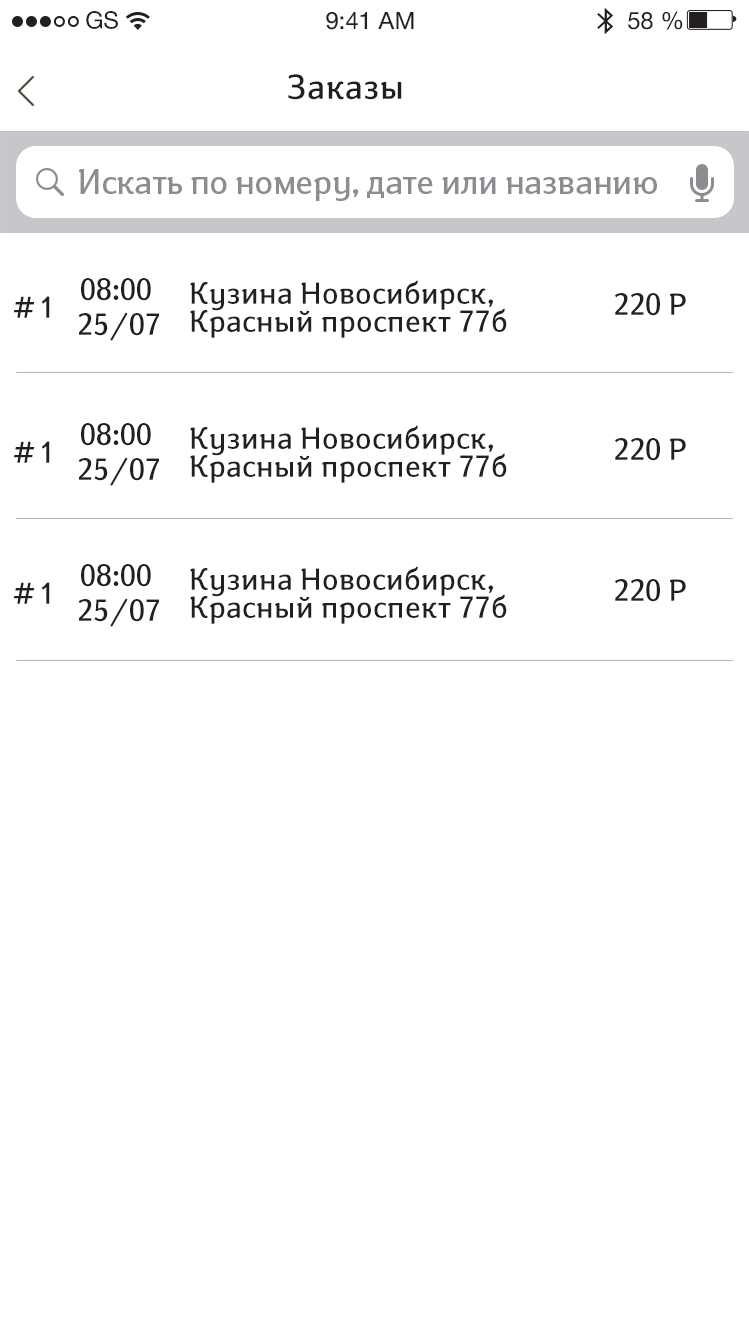
<style>
.page{position:relative;width:749px;height:1334px;background:#ffffff}
.page>*{position:absolute;margin:0}
.t1{font:24px "HelveticaNeueCyr-Roman";color:#221f1e}
.t2{font:34px "SusanBook-Regular";color:#221f1e}
.t3{font:34px "SusanBook-Regular";letter-spacing:-0.024em;color:#8d8d91}
.t4{font:30px "SusanBook-Regular";color:#221f1e}
.t5{font:30px/28px "SusanBook-Regular";color:#221f1e}
</style>
<div class="page">
<p class="t1" style="left:86px;top:11px;width:32px;height:18px">GS</p>
<p class="t1" style="left:326px;top:11px;width:88px;height:19px">9:41 AM</p>
<p class="t1" style="left:628px;top:11px;width:55px;height:19px">58 %</p>
<p class="t2" style="left:288px;top:74px;width:114px;height:26px">Заказы</p>
<p class="t3" style="left:79px;top:169px;width:578px;height:32px">Искать по номеру, дате или названию</p>
<p class="t4" style="left:81px;top:278px;width:70px;height:23px">08:00</p>
<p class="t5" style="left:190px;top:280px;width:317px;height:58px">Кузина Новосибирск, Красный проспект 77б</p>
<p class="t4" style="left:615px;top:293px;width:71px;height:23px">220 Р</p>
<p class="t4" style="left:13px;top:296px;width:37px;height:22px"># 1</p>
<p class="t4" style="left:78px;top:312px;width:81px;height:29px">25/07</p>
<p class="t4" style="left:81px;top:423px;width:70px;height:23px">08:00</p>
<p class="t5" style="left:190px;top:425px;width:317px;height:58px">Кузина Новосибирск, Красный проспект 77б</p>
<p class="t4" style="left:615px;top:438px;width:71px;height:23px">220 Р</p>
<p class="t4" style="left:13px;top:441px;width:37px;height:22px"># 1</p>
<p class="t4" style="left:78px;top:457px;width:81px;height:29px">25/07</p>
<p class="t4" style="left:81px;top:564px;width:70px;height:23px">08:00</p>
<p class="t5" style="left:190px;top:566px;width:317px;height:58px">Кузина Новосибирск, Красный проспект 77б</p>
<p class="t4" style="left:13px;top:582px;width:37px;height:22px"># 1</p>
<p class="t4" style="left:615px;top:579px;width:71px;height:23px">220 Р</p>
<p class="t4" style="left:78px;top:598px;width:81px;height:29px">25/07</p>
</div>
